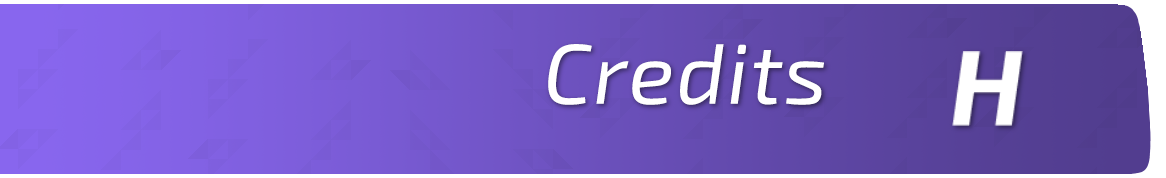
<style>
.page{position:relative;width:1166px;height:178px}
.page>*{position:absolute;margin:0}
.t1{font:85px "Exo2.0-Italic";letter-spacing:0.025em;color:#ffffff}
</style>
<div class="page">
<p class="t1" style="left:548px;top:44px;width:276px;height:61px">Credits</p>
</div>
